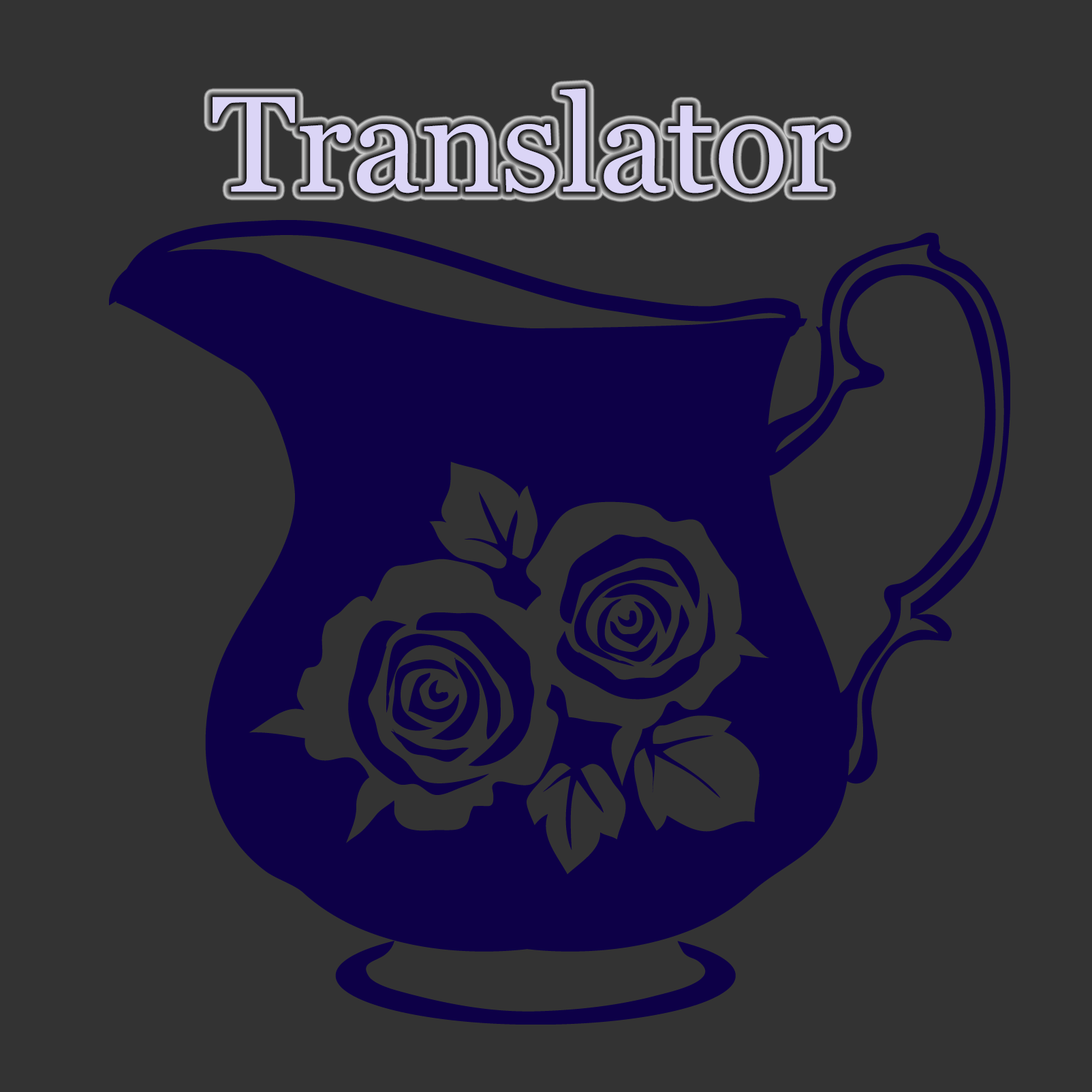
<style>
.page{position:relative;width:1092px;height:1092px;background:#333333}
.page>*{position:absolute;margin:0}
.t1{font:136.2px "Georgia";color:#dbd5f6}
</style>
<div class="page">
<p class="t1" style="left:213px;top:88px;width:630px;height:106px">Translator</p>
</div>
